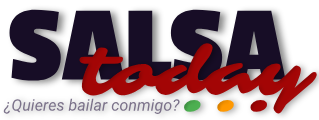
<style>
.page{position:relative;width:319px;height:120px;background:#170d26}
.page>*{position:absolute;margin:0}
.t1{font:110.6px "PassionOne-Bold";color:#170d26}
.t2{font:66.7px "Sarina-Regular";color:#a30505}
.t3{font:16px "Roboto-Italic";color:#7b728a}
.t4{font:66.7px "Sarina-Regular";color:#4caf50}
.t5{font:66.7px "Sarina-Regular";color:#ff9800}
</style>
<div class="page">
<p class="t1" style="left:9px;top:9px;width:277px;height:72px">SALSA</p>
<p class="t2" style="left:79px;top:43px;width:238px;height:71px">today</p>
<p class="t3" style="left:3px;top:98px;width:177px;height:17px">¿Quieres bailar conmigo?</p>
<p class="t4" style="left:184px;top:99px;width:83px;height:13px">.<span class="t5">.</span><span class="t2">.</span></p>
</div>
